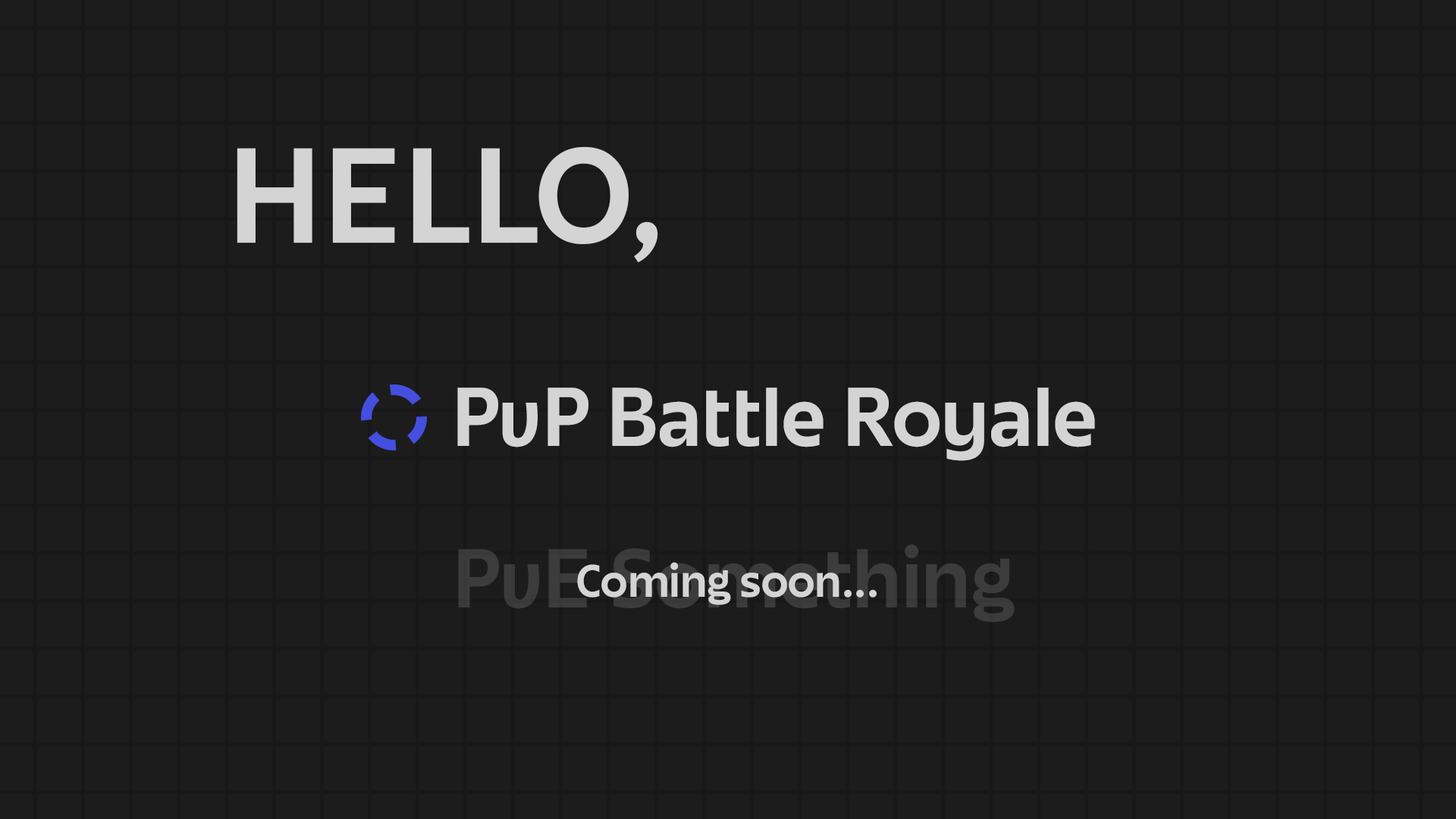
<style>
.page{position:relative;width:1456px;height:819px;background:#1d1c1d}
.page>*{position:absolute;margin:0}
.t1{font:117.8px "JuneExptVariable-Active";color:#d4d4d4}
.t2{font:72.7px "JuneExptVariable-Active";color:#d4d4d4}
.t3{font:72.7px "JuneExptVariable-Active";color:#3d3c3d}
.t4{font:39.7px "JuneExptVariable-Active";color:#d4d4d4}
</style>
<div class="page">
<p class="t1" style="left:237px;top:146px;width:421px;height:116px">HELLO,</p>
<p class="t2" style="left:457px;top:388px;width:638px;height:73px">PvP Battle Royale</p>
<p class="t3" style="left:458px;top:544px;width:557px;height:79px">PvE Something</p>
<p class="t4" style="left:577px;top:562px;width:300px;height:43px">Coming soon...</p>
</div>
